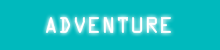
<style>
.page{position:relative;width:220px;height:50px;background:#00b9bd}
.page>*{position:absolute;margin:0}
.t1{font:20px "OCRAStd";color:#ffffff}
</style>
<div class="page">
<p class="t1" style="left:45px;top:17px;width:126px;height:16px">ADVENTURE</p>
</div>
